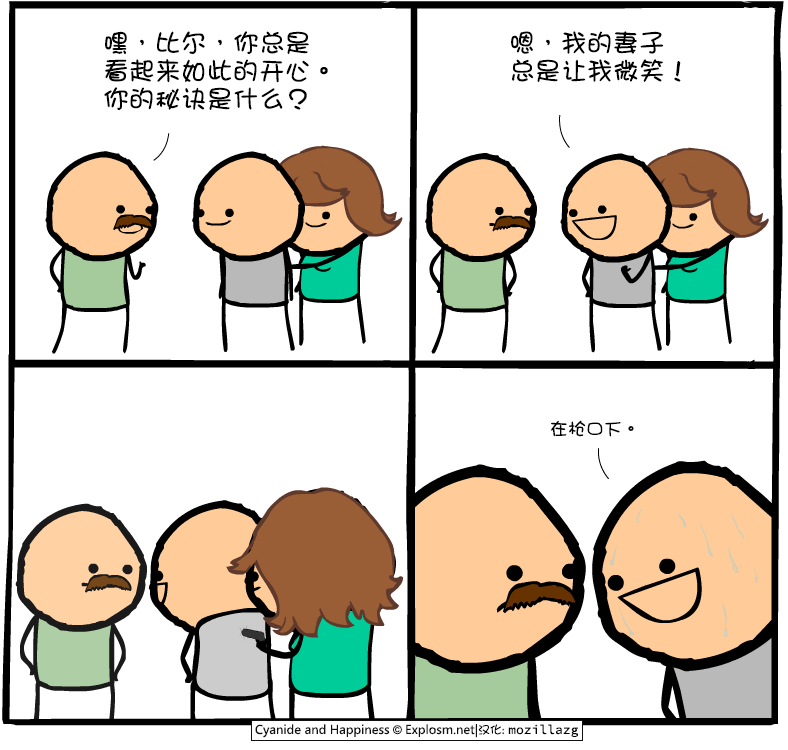
<style>
.page{position:relative;width:788px;height:750px;background:#ffffff}
.page>*{position:absolute;margin:0}
.t1{font:26px/28px "DFGirl";color:#000000}
.t2{font:18px "DFGirl";color:#000000}
</style>
<div class="page">
<p class="t1" style="left:104px;top:31px;width:224px;height:80px">嘿，比尔，你总是<br>看起来如此的开心。<br>你的秘诀是什么？</p>
<p class="t1" style="left:511px;top:31px;width:170px;height:52px">嗯，我的妻子<br>总是让我微笑！</p>
<p class="t2" style="left:551px;top:420px;width:83px;height:17px">在枪口下。</p>
</div>
